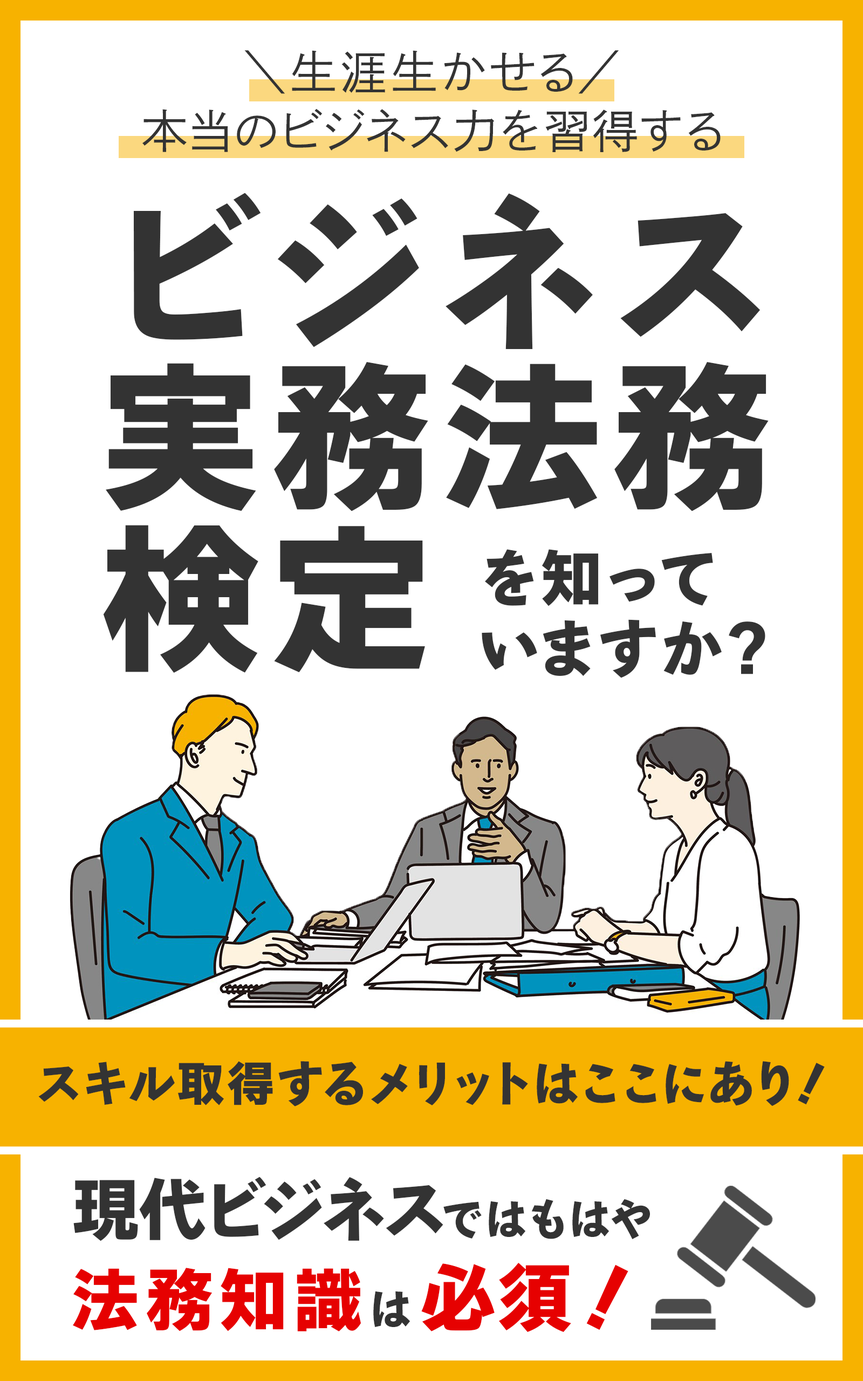
<style>
.page{position:relative;width:863px;height:1381px;background:#ffffff}
.page>*{position:absolute;margin:0}
.t1{font:46.3px "DNPShueiGoKinStd-L";letter-spacing:0.075em;color:#333333}
.t2{font:46.3px "DNPShueiGoKinStd-L";letter-spacing:0.05em;color:#333333}
.t3{font:162.2px/161.8px "BokutohRuika-07";letter-spacing:0.05em;color:#333333}
.t4{font:168.5px/161.8px "BokutohRuika-07";letter-spacing:0.12em;color:#333333}
.t5{font:61.8px/70.3px "BokutohRuika-07";letter-spacing:0.05em;color:#333333}
.t6{font:48.1px "BokutohRuika-07";letter-spacing:0.025em;color:#333333}
.t7{font:48.1px "BokutohRuika-07";letter-spacing:0.05em;color:#333333}
.t8{font:68.8px "BokutohRuika-07";letter-spacing:-0.01em;color:#333333}
.t9{font:43.2px "BokutohRuika-07";letter-spacing:0.05em;color:#333333}
.t10{font:68.8px "BokutohRuika-07";letter-spacing:0.08em;color:#e60101}
.t11{font:43.2px "BokutohRuika-07";letter-spacing:0.2em;color:#333333}
.t12{font:75px "BokutohRuika-07";letter-spacing:0.05em;color:#e60101}
</style>
<div class="page">
<p class="t1" style="left:244px;top:50px;width:375px;height:44px">＼生涯生かせる／</p>
<p class="t2" style="left:142px;top:108px;width:579px;height:44px">本当のビジネス力を習得する</p>
<p class="t3" style="left:103px;top:193px;width:666px;height:480px"><span class="t4">ビジネス<br></span>実務法務<br>検定</p>
<p class="t5" style="left:482px;top:549px;width:284px;height:129px">を知って<br>いますか？</p>
<p class="t6" style="left:38px;top:1061px;width:787px;height:46px"><span class="t7">スキル取得する</span>メリットはここにあり<span class="t7">！</span></p>
<p class="t8" style="left:73px;top:1177px;width:577px;height:156px">現代ビジネス<span class="t9">ではもはや<br></span><span class="t10">法務知識</span><span class="t11">は</span><span class="t12">必須！</span></p>
</div>
